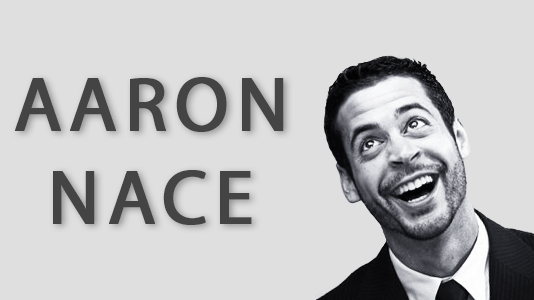
<style>
.page{position:relative;width:534px;height:300px;background:#dfdfdf}
.page>*{position:absolute;margin:0}
.t1{font:77.5px "MyriadPro-Regular";letter-spacing:0.08em;color:#4d4b4b;font-weight:bold}
</style>
<div class="page">
<p class="t1" style="left:15px;top:77px;width:269px;height:148px;text-align:center">AARON<br>NACE</p>
</div>
